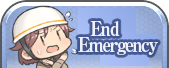
<style>
.page{position:relative;width:169px;height:68px}
.page>*{position:absolute;margin:0}
.t1{font:20px/16px "RyuminPro-ExBold";letter-spacing:-0.1em;color:#ffffff;scale:0.9 1}
</style>
<div class="page">
<p class="t1" style="left:78px;top:21px;width:80px;height:34px;opacity:0.8">End<br>Emergency</p>
</div>
